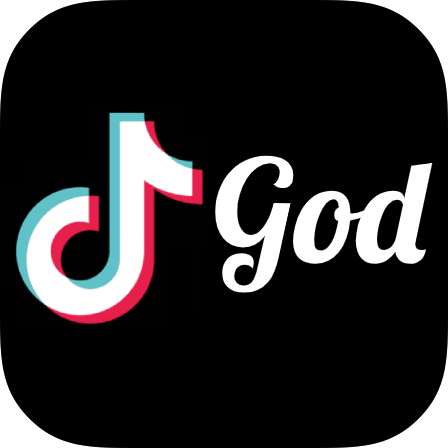
<style>
.page{position:relative;width:448px;height:448px;background:#000000}
.page>*{position:absolute;margin:0}
.t1{font:143px "LobsterTwo-BoldItalic";color:#ffffff}
</style>
<div class="page">
<p class="t1" style="left:215px;top:155px;width:218px;height:138px">God</p>
</div>
